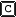
<style>
.page{position:relative;width:16px;height:17px;background:#ffffff}
.page>*{position:absolute;margin:0}
.t1{font:12px "CourierNewPS-BoldMT";color:#000000}
</style>
<div class="page">
<p class="t1" style="left:5px;top:5px;width:7px;height:8px">C</p>
</div>
